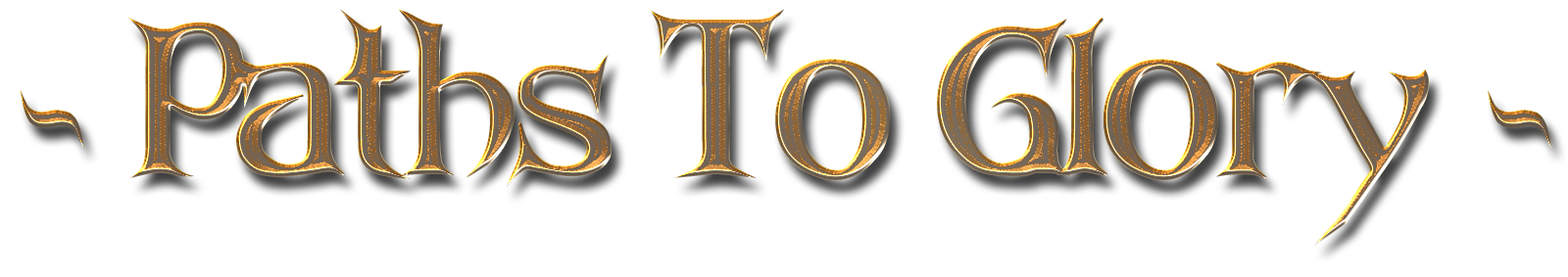
<style>
.page{position:relative;width:1568px;height:277px;background:#ffffff}
.page>*{position:absolute;margin:0}
.t1{font:185.2px "ARKHAMBold";letter-spacing:-0.05em}
</style>
<div class="page">
<p class="t1" style="left:20px;top:9px;width:1532px;height:237px">- Paths To Glory -</p>
<p class="t1" style="left:20px;top:9px;width:1532px;height:237px">- Paths To Glory -</p>
</div>
